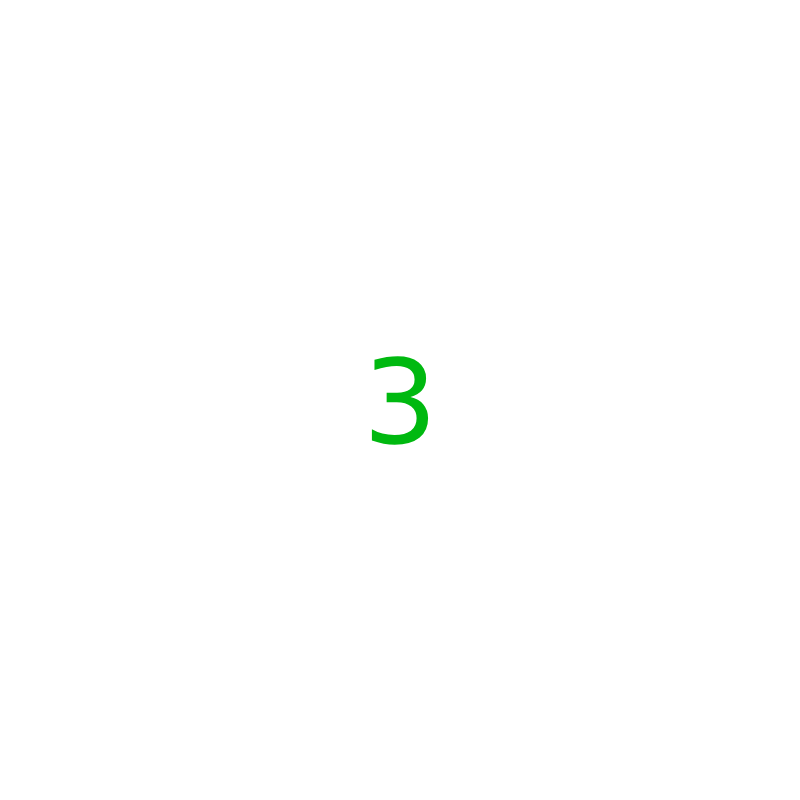
<style>
.page{position:relative;width:800px;height:800px;background:#ffffff}
.page>*{position:absolute;margin:0}
.t1{font:117px "DejaVuSans";color:#00b910}
</style>
<div class="page">
<p class="t1" style="left:371px;top:356px;width:58px;height:89px">3</p>
</div>
